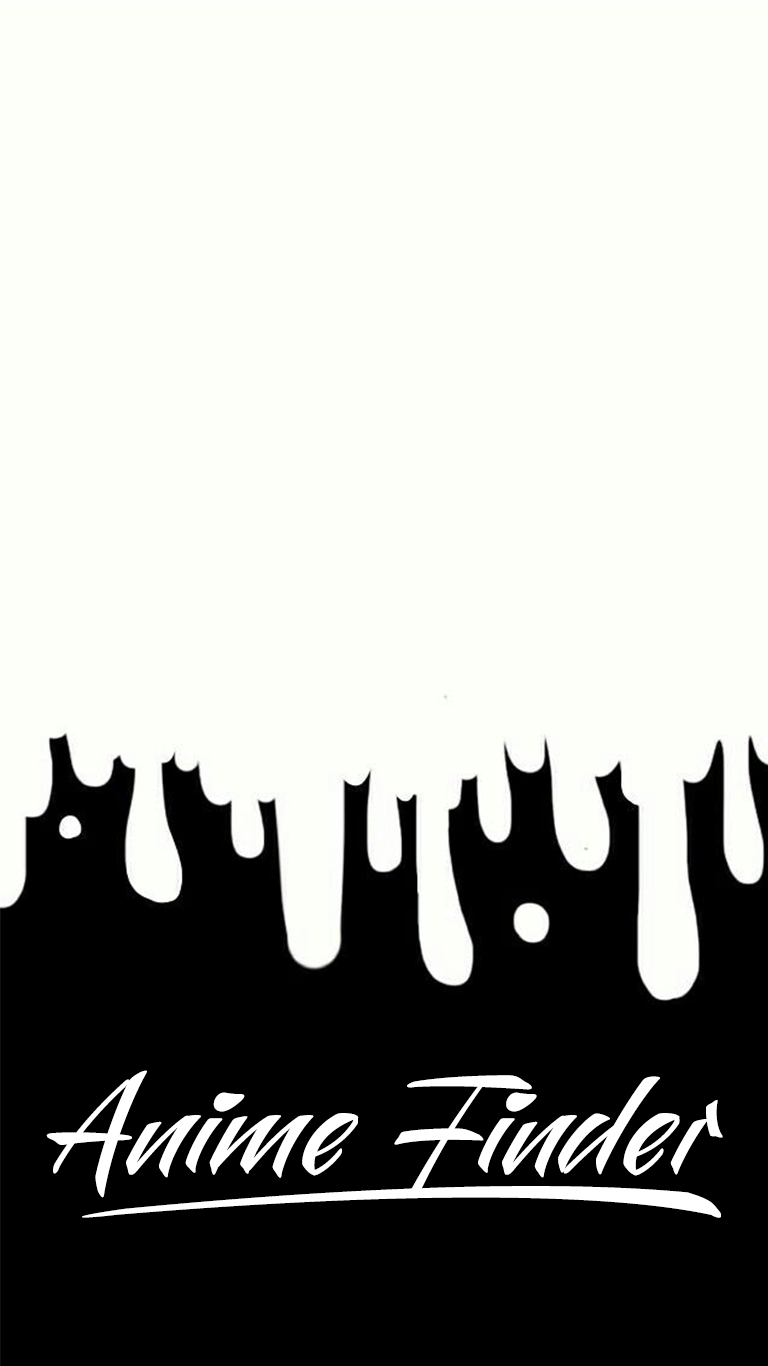
<style>
.page{position:relative;width:768px;height:1366px;background:#fdfff9}
.page>*{position:absolute;margin:0}
.t1{font:120px "MauritzSansPERSONALUSE-LightItalic";color:#ffffff}
.t2{font:118.9px "MauritzSansPERSONALUSE-LightItalic";color:#ffffff;scale:1.7 1}
</style>
<div class="page">
<p class="t1" style="left:46px;top:1070px;width:677px;height:128px">Anime Finder</p>
<p class="t2" style="left:82px;top:1186px;width:639px;height:32px">_</p>
</div>
